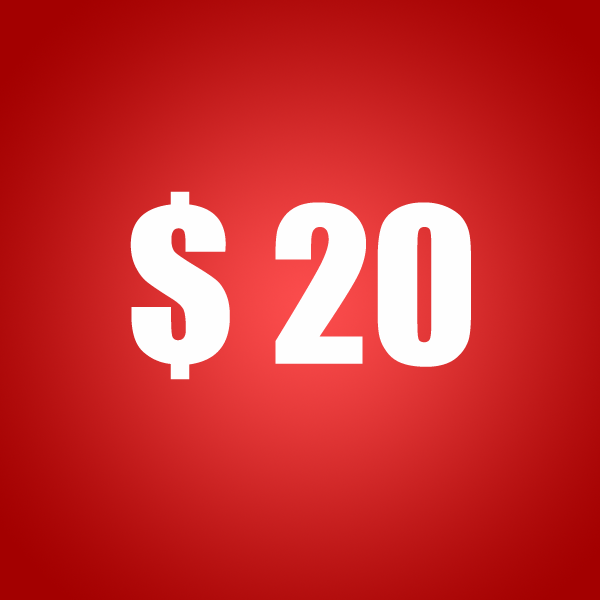
<style>
.page{position:relative;width:600px;height:600px}
.page>*{position:absolute;margin:0}
.t1{font:200px "Impact";color:#fefefe}
</style>
<div class="page">
<p class="t1" style="left:130px;top:191px;width:341px;height:189px">$ 20</p>
</div>
